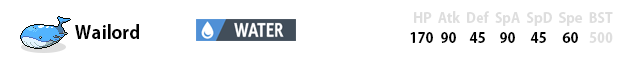
<style>
.page{position:relative;width:630px;height:60px;background:#ffffff}
.page>*{position:absolute;margin:0}
.t1{font:14px "AdobeGothicStd-Bold";color:#dedede}
.t2{font:18px "AdobeGothicStd-Bold";color:#000000}
.t3{font:14px "AdobeGothicStd-Bold";color:#000000}
</style>
<div class="page">
<p class="t1" style="left:414px;top:11px;width:199px;height:15px">HP  Atk  Def  SpA  SpD  Spe  BST</p>
<p class="t2" style="left:75px;top:24px;width:64px;height:15px">Wailord</p>
<p class="t3" style="left:410px;top:32px;width:23px;height:11px">170</p>
<p class="t3" style="left:441px;top:32px;width:15px;height:11px">90</p>
<p class="t3" style="left:469px;top:32px;width:16px;height:11px">45</p>
<p class="t3" style="left:500px;top:32px;width:15px;height:11px">90</p>
<p class="t3" style="left:530px;top:32px;width:16px;height:11px">45</p>
<p class="t3" style="left:562px;top:32px;width:16px;height:11px">60</p>
<p class="t1" style="left:589px;top:32px;width:24px;height:11px">500</p>
</div>
